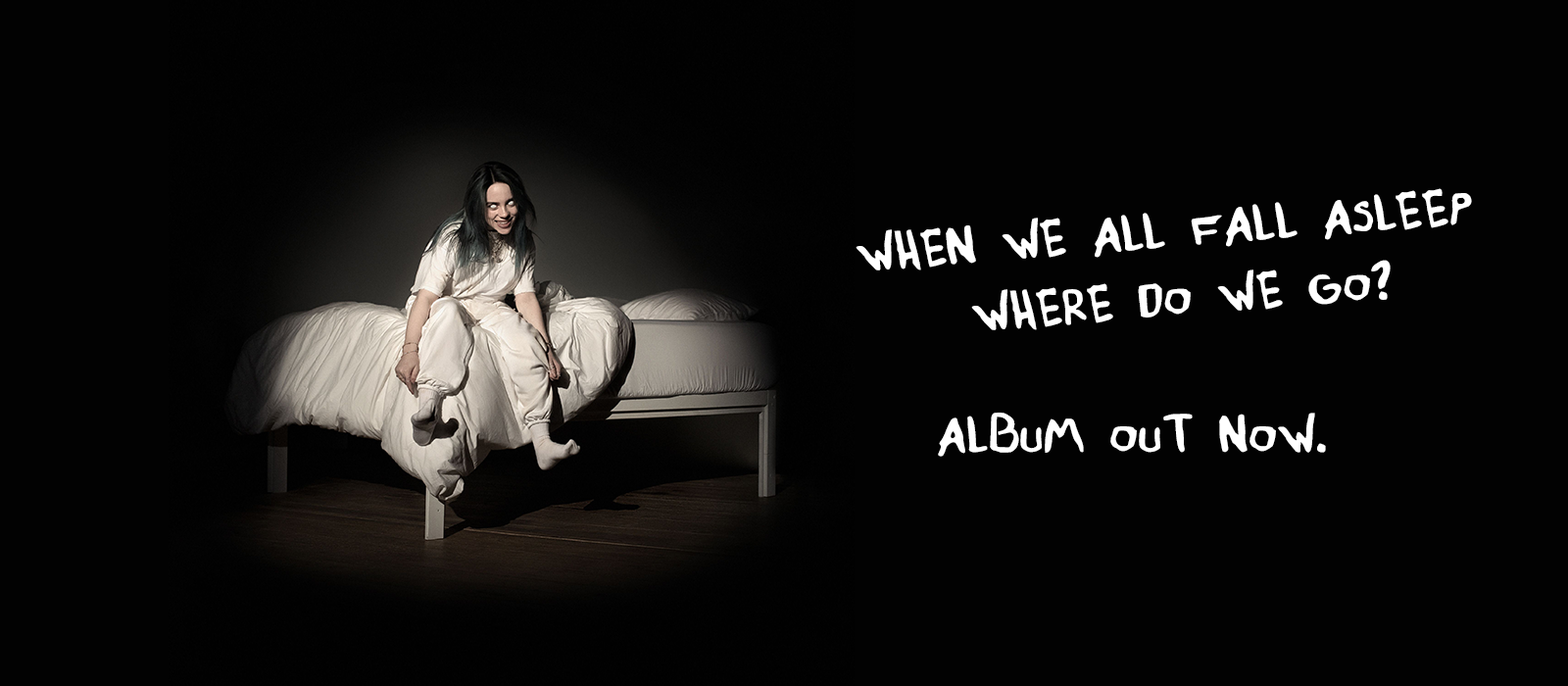
<style>
.page{position:relative;width:1568px;height:686px;background:#020202}
.page>*{position:absolute;margin:0}
.t1{font:57.2px "Whenweallfallasleep-Regular";color:#ffffff}
</style>
<div class="page">
<p class="t1" style="left:856px;top:188px;width:616px;height:142px;text-align:center;rotate:-4deg">WHEN WE ALL FALL ASLEEP <br>WHERE DO WE GO?</p>
<p class="t1" style="left:938px;top:413px;width:388px;height:44px">ALBUM OUT NOW.</p>
</div>
